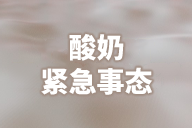
<style>
.page{position:relative;width:192px;height:128px}
.page>*{position:absolute;margin:0}
.t1{font:28px "SourceHanSansSC-Heavy";color:#ffffff}
</style>
<div class="page">
<p class="t1" style="left:41px;top:33px;width:112px;height:62px;text-align:center">酸奶<br>紧急事态</p>
</div>
